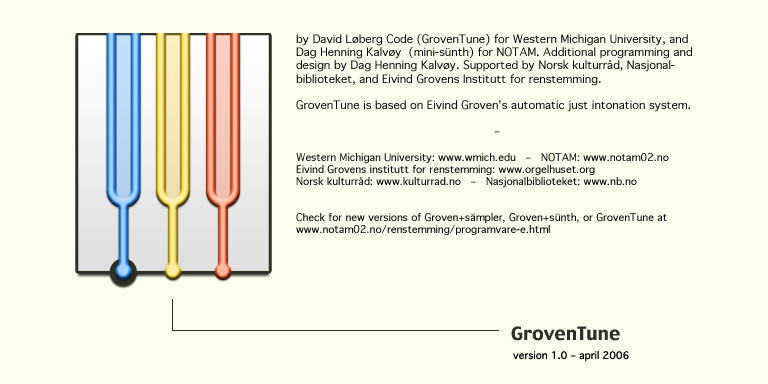
<style>
.page{position:relative;width:768px;height:384px;background:#feffee}
.page>*{position:absolute;margin:0}
.t1{font:11px "Geneva";color:#000000}
.t2{font:10px "Geneva";color:#000000}
.t3{font:18px "Charcoal";color:#2f2e27}
</style>
<div class="page">
<p class="t1" style="left:296px;top:34px;width:396px;height:201px">by David Løberg Code (GrovenTune) for Western Michigan University, and<br>Dag Henning Kalvøy  (mini-sünth) for NOTAM. Additional programming and<br>design by Dag Henning Kalvøy. Supported by Norsk kulturråd, Nasjonal-<br>biblioteket, and Eivind Grovens Institutt for renstemming.<br><br>GrovenTune is based on Eivind Groven's automatic just intonation system.<br><br>          –<br><br><span class="t2">Western Michigan University: www.wmich.edu   –   NOTAM: www.notam02.no<br>Eivind Grovens institutt for renstemming: www.orgelhuset.org<br>Norsk kulturråd: www.kulturrad.no   –   Nasjonalbiblioteket: www.nb.no<br><br><br>Check for new versions of Groven+sämpler, Groven+sünth, or GrovenTune at<br>www.notam02.no/renstemming/programvare-e.html</span></p>
<p class="t3" style="left:511px;top:326px;width:109px;height:15px">GrovenTune</p>
<p class="t2" style="left:513px;top:351px;width:116px;height:11px">version 1.0 – april 2006</p>
</div>
